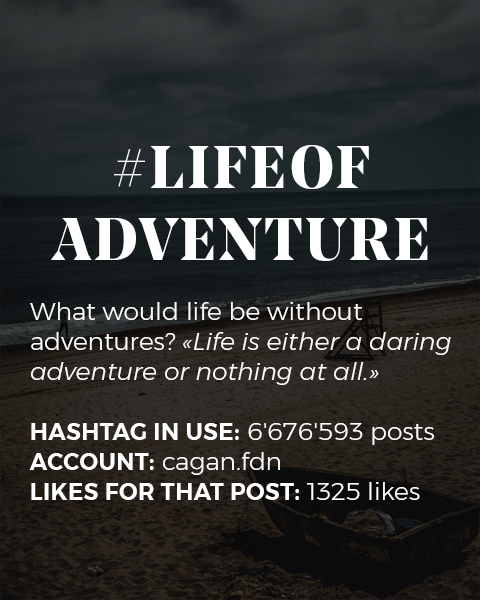
<style>
.page{position:relative;width:480px;height:600px}
.page>*{position:absolute;margin:0}
.t1{font:25px "Montserrat-LightItalic";color:#ffffff}
.t2{font:60px "NoeDisplay-Bold";letter-spacing:0.05em;color:#ffffff;text-transform:uppercase}
.t3{font:25px "Montserrat-Light";color:#ffffff}
.t4{font:23px "Montserrat-SemiBold";letter-spacing:0.02em;color:#ffffff;text-transform:uppercase}
</style>
<div class="page">
<p class="t1" style="left:29px;top:145px;width:422px;height:355px;text-align:center"><span class="t2">#lifeof<br>adventure<br></span><span class="t3"><br>What would life be without <br>adventures? </span>«Life is either a daring adventure or nothing at all.»<br><br><span class="t4">Hashtag in use:</span><span class="t3"> 6'676'593 posts<br></span><span class="t4">Account:</span><span class="t3"> cagan.fdn<br></span><span class="t4">likes for that post:</span><span class="t3"> 1325 likes</span></p>
</div>
